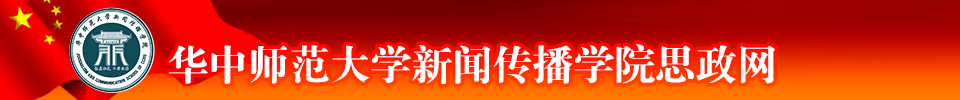
<style>
.page{position:relative;width:960px;height:100px}
.page>*{position:absolute;margin:0}
.t1{font:41.7px "FZDBSJW--GB1-0";letter-spacing:-0.025em;color:#ffffff}
</style>
<div class="page">
<p class="t1" style="left:168px;top:44px;width:607px;height:40px">华中师范大学新闻传播学院思政网</p>
</div>
